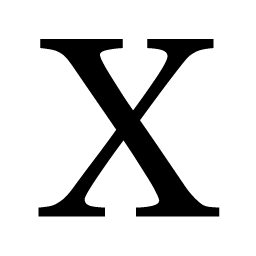
<style>
.page{position:relative;width:256px;height:256px;background:#ffffff}
.page>*{position:absolute;margin:0}
.t1{font:255.7px "Georgia";color:#000000}
</style>
<div class="page">
<p class="t1" style="left:38px;top:39px;width:182px;height:178px">X</p>
</div>
